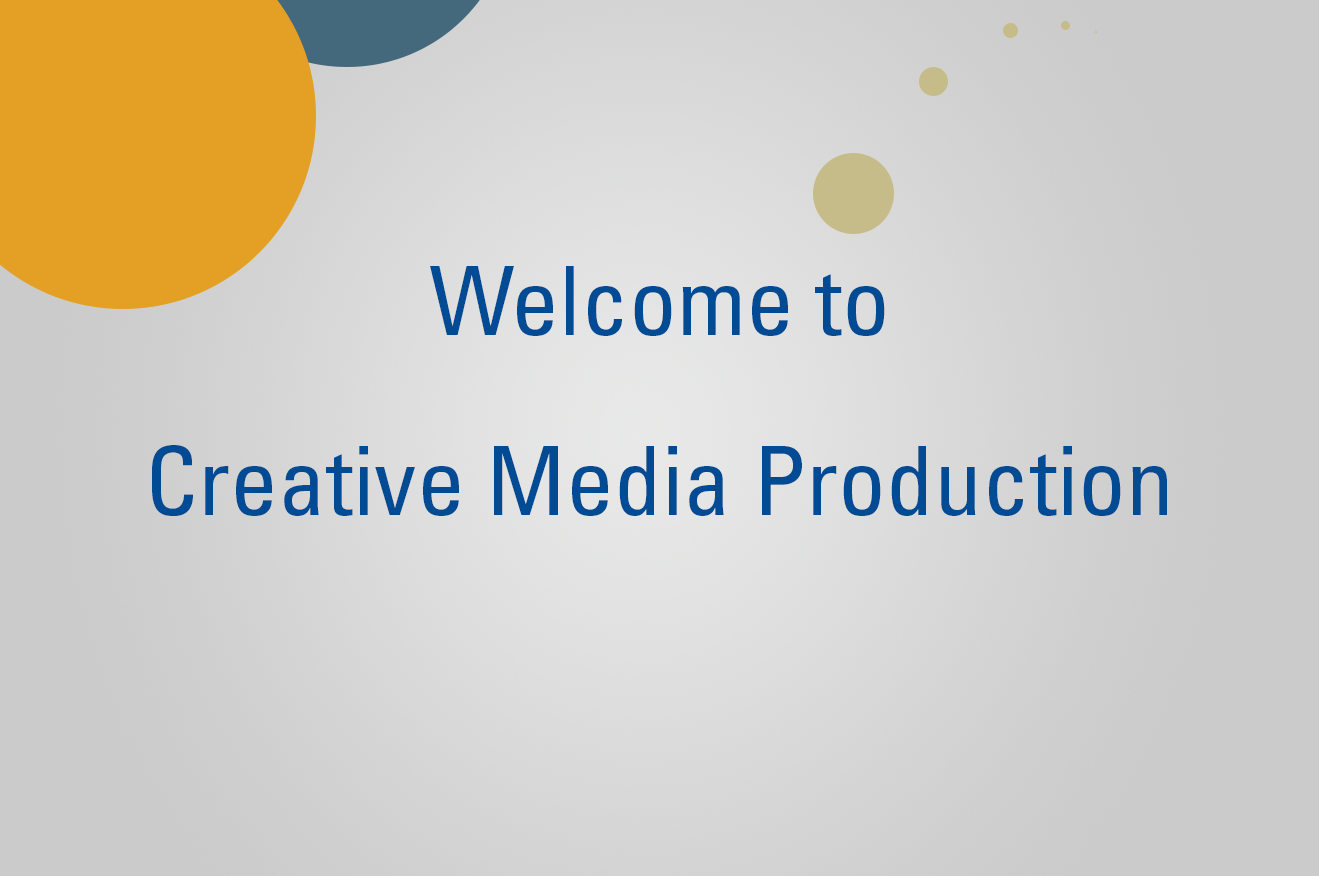
<style>
.page{position:relative;width:1319px;height:876px}
.page>*{position:absolute;margin:0}
.t1{font:96px/60px "UniversLTStd-Cn";color:#014b94}
</style>
<div class="page">
<p class="t1" style="left:152px;top:266px;width:1015px;height:250px;text-align:center">Welcome to <br><br><br>Creative Media Production</p>
</div>
